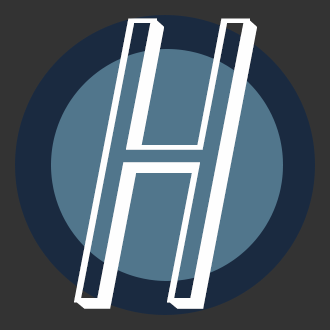
<style>
.page{position:relative;width:330px;height:330px;background:#333333}
.page>*{position:absolute;margin:0}
.t1{font:365.7px "AlienLeague3DItalic";color:#fefefe;scale:1.37 1}
</style>
<div class="page">
<p class="t1" style="left:74px;top:18px;width:183px;height:291px">H</p>
</div>
